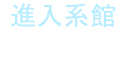
<style>
.page{position:relative;width:130px;height:60px;background:#ffffff}
.page>*{position:absolute;margin:0}
.t1{font:26.6px "MS-Gothic";color:#b8ecff}
</style>
<div class="page">
<p class="t1" style="left:11px;top:3px;width:105px;height:25px">進入系館</p>
</div>
